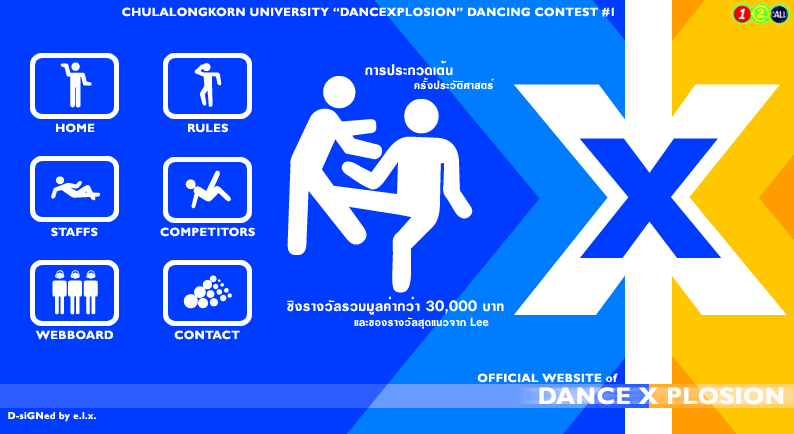
<style>
.page{position:relative;width:794px;height:434px;background:#003cff}
.page>*{position:absolute;margin:0}
.t1{font:12px "GillSansMT-Bold";letter-spacing:0.025em;color:#ffffff}
.t2{font:60px "SuperstarDJ";letter-spacing:0.025em;color:#ffffff}
.t3{font:223.9px "SuperstarDJ";letter-spacing:0.025em;color:#ffffff}
.t4{font:500px "GillSansMT-Bold";letter-spacing:0.025em;color:#ffffff}
.t5{font:255px "SuperstarDJ";letter-spacing:0.025em;color:#ffffff}
.t6{font:258.7px "GillSansMT-Bold";letter-spacing:0.025em;color:#003cff}
.t7{font:24px "GillSansMT-Bold";letter-spacing:0.025em;color:#ffffff}
.t8{font:10px "GillSansMT-Bold";letter-spacing:0.025em;color:#ffffff}
</style>
<div class="page">
<p class="t1" style="left:122px;top:7px;width:492px;height:10px">CHULALONGKORN UNIVERSITY “DANCEXPLOSION” DANCING CONTEST #1</p>
<p class="t2" style="left:60px;top:62px;width:32px;height:46px">n</p>
<p class="t2" style="left:194px;top:63px;width:28px;height:44px">w</p>
<p class="t3" style="left:287px;top:76px;width:95px;height:179px;rotate:-120deg">t</p>
<p class="t4" style="left:514px;top:84px;width:273px;height:231px">x</p>
<p class="t5" style="left:321px;top:99px;width:152px;height:194px;rotate:-45deg">u</p>
<p class="t1" style="left:56px;top:123px;width:39px;height:10px">HOME</p>
<p class="t1" style="left:188px;top:123px;width:40px;height:10px">RULES</p>
<p class="t6" style="left:580px;top:138px;width:142px;height:120px">x</p>
<p class="t2" style="left:185px;top:170px;width:46px;height:39px">q</p>
<p class="t2" style="left:51px;top:176px;width:49px;height:25px">v</p>
<p class="t1" style="left:51px;top:227px;width:47px;height:10px">STAFFS</p>
<p class="t1" style="left:160px;top:227px;width:95px;height:10px">COMPETITORS</p>
<p class="t2" style="left:52px;top:270px;width:46px;height:45px">I</p>
<p class="t2" style="left:183px;top:275px;width:49px;height:34px">|</p>
<p class="t1" style="left:35px;top:330px;width:78px;height:10px">WEBBOARD</p>
<p class="t1" style="left:174px;top:330px;width:66px;height:10px">CONTACT</p>
<p class="t1" style="left:477px;top:373px;width:141px;height:10px">OFFICIAL WEBSITE of</p>
<p class="t7" style="left:539px;top:387px;width:245px;height:18px">DANCE X PLOSION</p>
<p class="t8" style="left:8px;top:412px;width:88px;height:10px">D-siGNed by e.l.x.</p>
</div>
